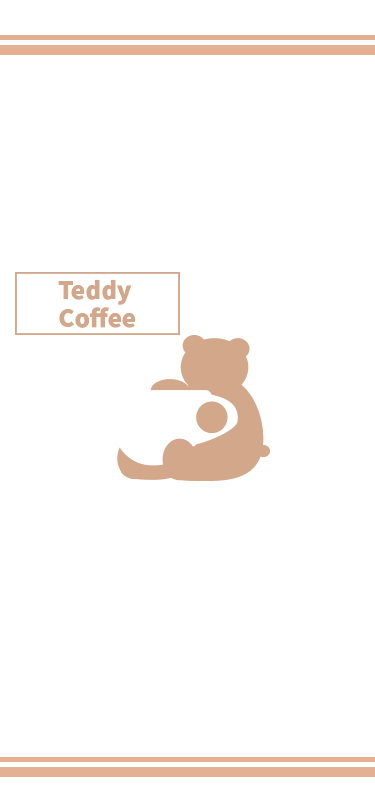
<style>
.page{position:relative;width:375px;height:812px;background:#ffffff}
.page>*{position:absolute;margin:0}
.t1{font:24px/28px "NotoSansKR-Black";color:#d3a88a}
</style>
<div class="page">
<p class="t1" style="left:58px;top:279px;width:78px;height:49px;text-align:center">Teddy <br>Coffee</p>
</div>
